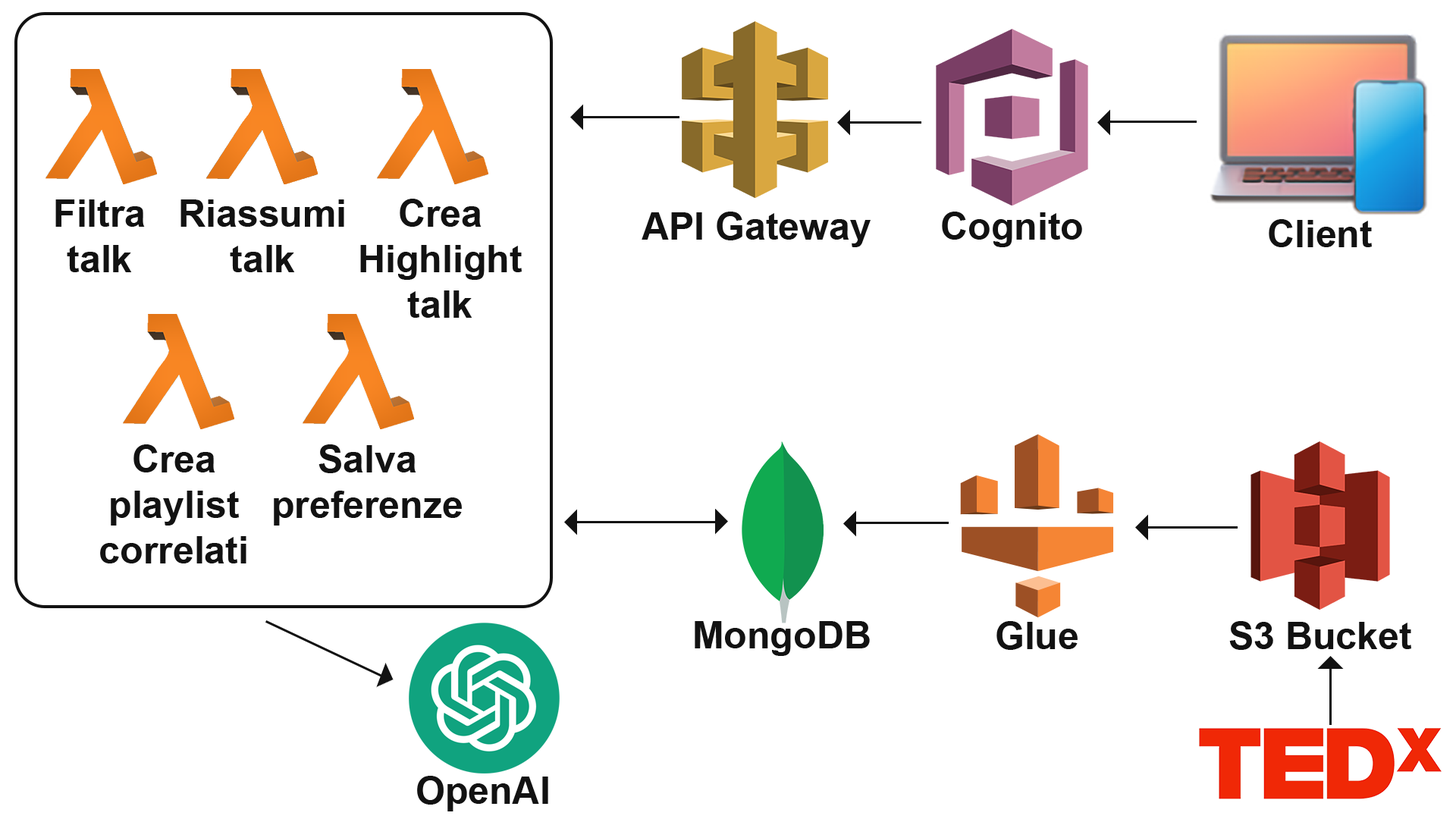
<style>
.page{position:relative;width:1456px;height:819px;background:#ffffff}
.page>*{position:absolute;margin:0}
.t1{font:37.9px "Arial-BoldMT";color:#121212}
</style>
<div class="page">
<p class="t1" style="left:55px;top:199px;width:90px;height:73px;text-align:center">Filtra<br>talk</p>
<p class="t1" style="left:180px;top:199px;width:164px;height:73px;text-align:center">Riassumi<br>talk</p>
<p class="t1" style="left:360px;top:199px;width:162px;height:119px;text-align:center">Crea<br>Highlight<br>talk</p>
<p class="t1" style="left:642px;top:212px;width:229px;height:35px">API Gateway</p>
<p class="t1" style="left:942px;top:212px;width:140px;height:35px">Cognito</p>
<p class="t1" style="left:1269px;top:219px;width:103px;height:28px">Client</p>
<p class="t1" style="left:100px;top:444px;width:146px;height:119px;text-align:center">Crea<br>playlist<br>correlati</p>
<p class="t1" style="left:274px;top:444px;width:188px;height:82px;text-align:center">Salva<br>preferenze</p>
<p class="t1" style="left:695px;top:621px;width:175px;height:35px">MongoDB</p>
<p class="t1" style="left:996px;top:621px;width:82px;height:29px">Glue</p>
<p class="t1" style="left:1229px;top:621px;width:182px;height:29px">S3 Bucket</p>
<p class="t1" style="left:417px;top:776px;width:131px;height:35px">OpenAI</p>
</div>
